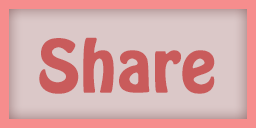
<style>
.page{position:relative;width:256px;height:128px;background:#dbc8c8}
.page>*{position:absolute;margin:0}
.t1{font:63.8px "HoboStd";color:#c95b5b;font-weight:bold}
</style>
<div class="page">
<p class="t1" style="left:39px;top:37px;width:176px;height:57px">Share</p>
</div>
